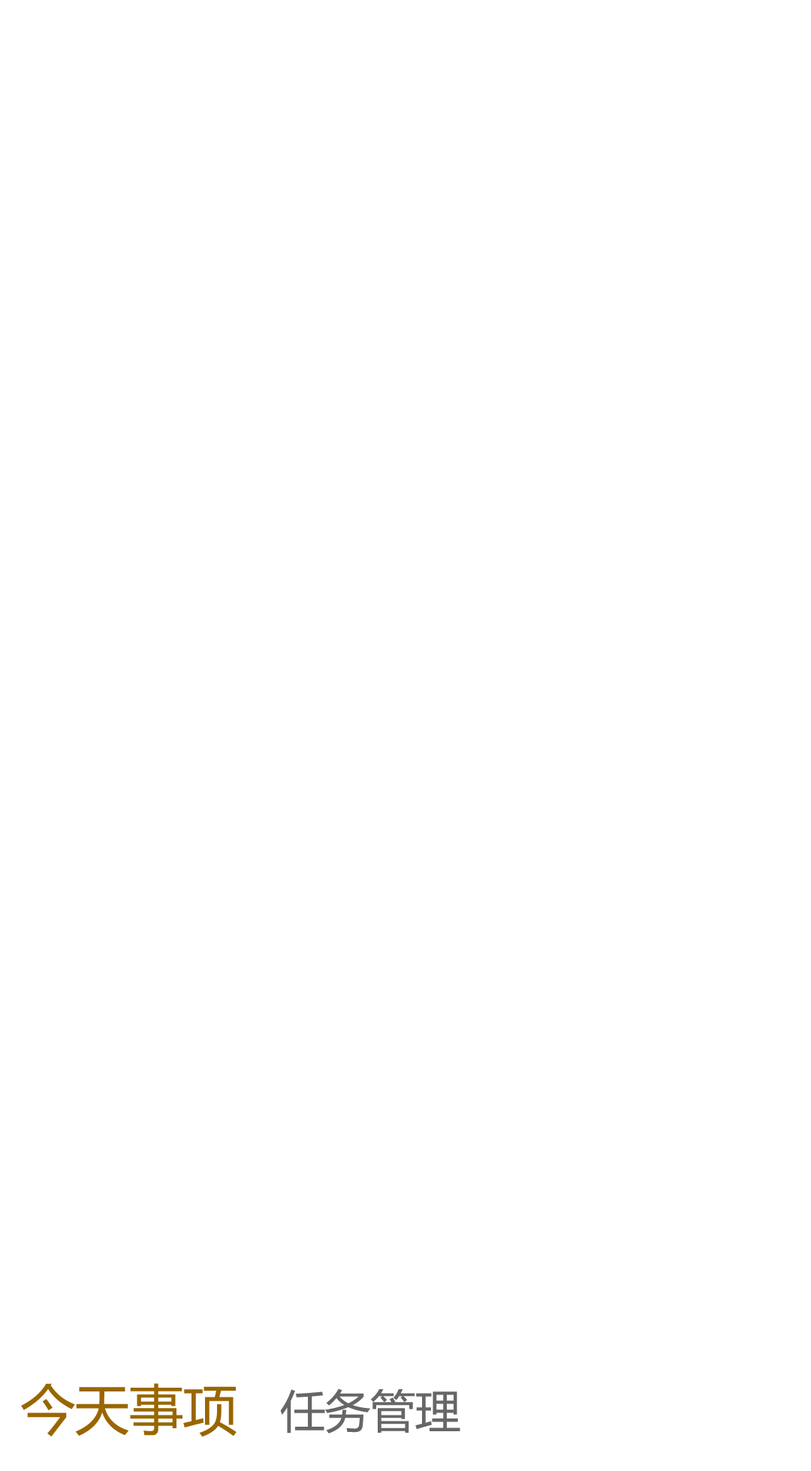
<style>
.page{position:relative;width:811px;height:1471px;background:#ffffff}
.page>*{position:absolute;margin:0}
.t1{font:54px "MicrosoftYaHei";color:#996600}
.t2{font:45px "MicrosoftYaHei";color:#666666}
</style>
<div class="page">
<p class="t1" style="left:21px;top:1383px;width:215px;height:54px">今天事项</p>
<p class="t2" style="left:280px;top:1389px;width:180px;height:45px">任务管理</p>
</div>
